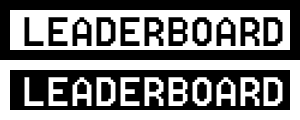
<style>
.page{position:relative;width:300px;height:120px;background:#ffffff}
.page>*{position:absolute;margin:0}
.t1{font:51.1px "8514oem";color:#000000}
.t2{font:51.1px "8514oem";color:#ffffff}
</style>
<div class="page">
<p class="t1" style="left:24px;top:17px;width:259px;height:29px">LEADERBOARD</p>
<p class="t2" style="left:24px;top:77px;width:259px;height:29px">LEADERBOARD</p>
</div>
